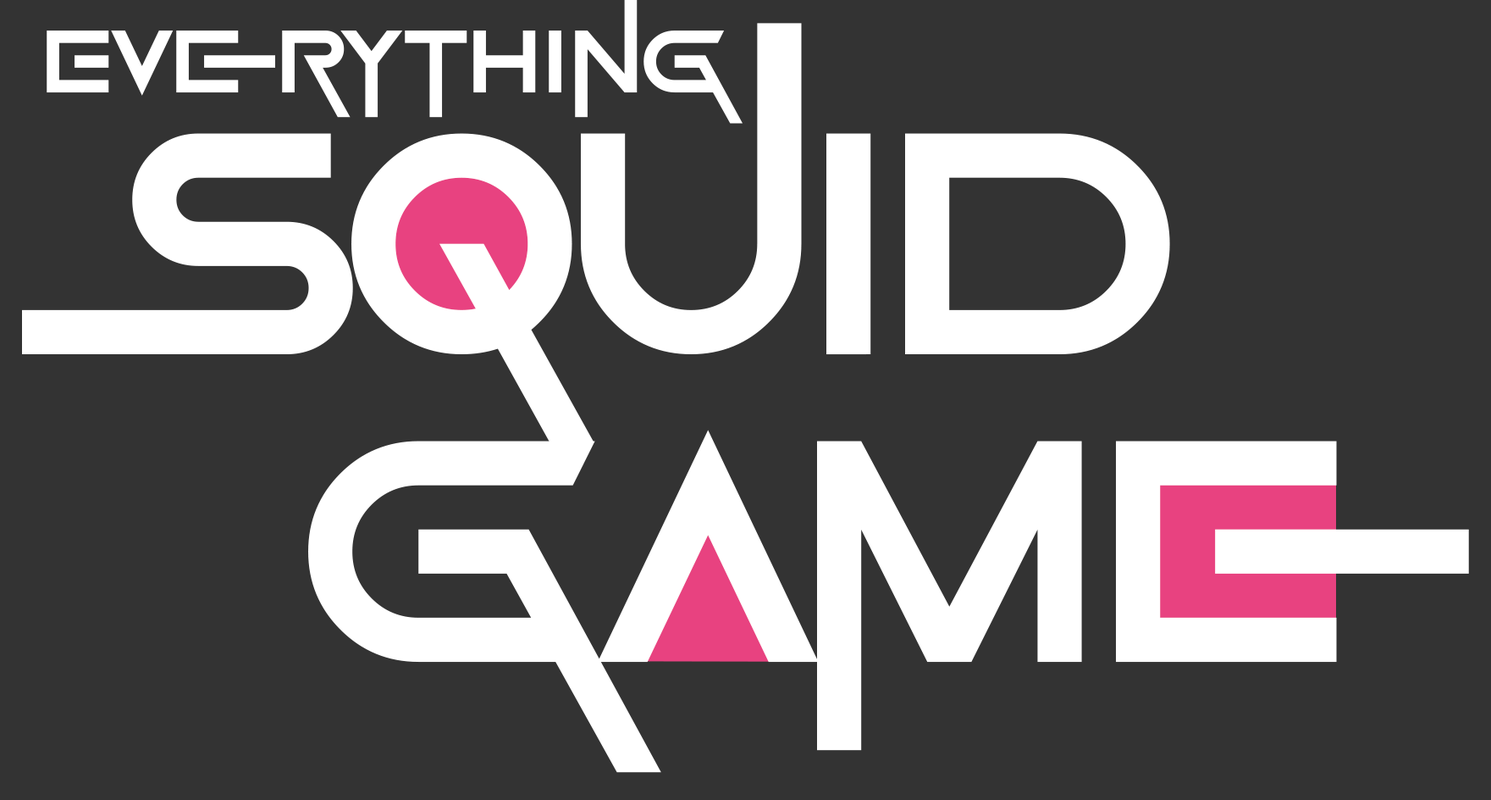
<style>
.page{position:relative;width:1491px;height:800px;background:#333333}
.page>*{position:absolute;margin:0}
.t1{font:98.8px "GameOfSquids";color:#ffffff}
.t2{font:352.9px "GameOfSquids";letter-spacing:-0.04em;color:#ffffff}
</style>
<div class="page">
<p class="t1" style="left:47px;top:0px;width:696px;height:124px">Everything</p>
<p class="t2" style="left:22px;top:23px;width:1148px;height:420px">squid</p>
<p class="t2" style="left:308px;top:429px;width:1161px;height:343px">game</p>
</div>
